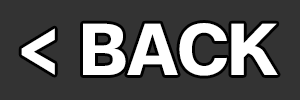
<style>
.page{position:relative;width:300px;height:100px;background:#333333}
.page>*{position:absolute;margin:0}
.t1{font:100px "FCMinimalBold";color:#ffffff}
</style>
<div class="page">
<p class="t1" style="left:21px;top:23px;width:257px;height:53px">&lt; BACK</p>
</div>
